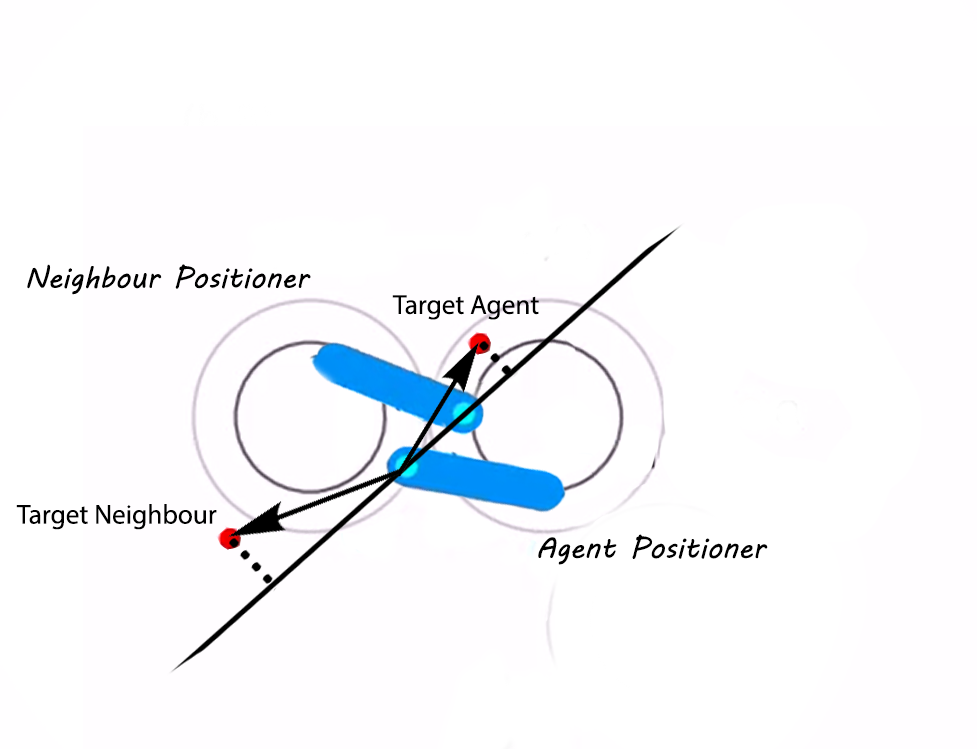
<style>
.page{position:relative;width:977px;height:749px;background:#ffffff}
.page>*{position:absolute;margin:0}
.t1{font:50px "MVBoli";color:#000000}
.t2{font:46.7px "MyriadPro-Regular";color:#000000}
</style>
<div class="page">
<p class="t1" style="left:27px;top:264px;width:284px;height:31px">Neighbour Positioner</p>
<p class="t2" style="left:392px;top:295px;width:147px;height:25px">Target Agent</p>
<p class="t2" style="left:16px;top:504px;width:201px;height:26px">Target Neighbour</p>
<p class="t1" style="left:538px;top:534px;width:230px;height:31px">Agent Positioner</p>
</div>
